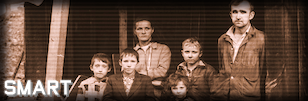
<style>
.page{position:relative;width:308px;height:101px}
.page>*{position:absolute;margin:0}
.t1{font:17.3px "ACES_MIL-STD-2161C";color:#ffffff}
</style>
<div class="page">
<p class="t1" style="left:4px;top:80px;width:67px;height:15px">smart</p>
</div>
